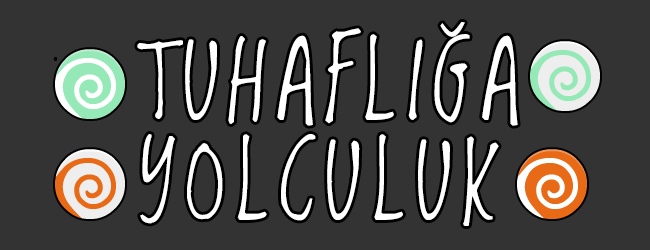
<style>
.page{position:relative;width:650px;height:250px;background:#333333}
.page>*{position:absolute;margin:0}
.t1{font:100px/100px "LovedbytheKing";letter-spacing:0.1em;color:#ffffff}
</style>
<div class="page">
<p class="t1" style="left:137px;top:22px;width:381px;height:204px">TUHAFLIĞA<br>YOLCULUK</p>
</div>
